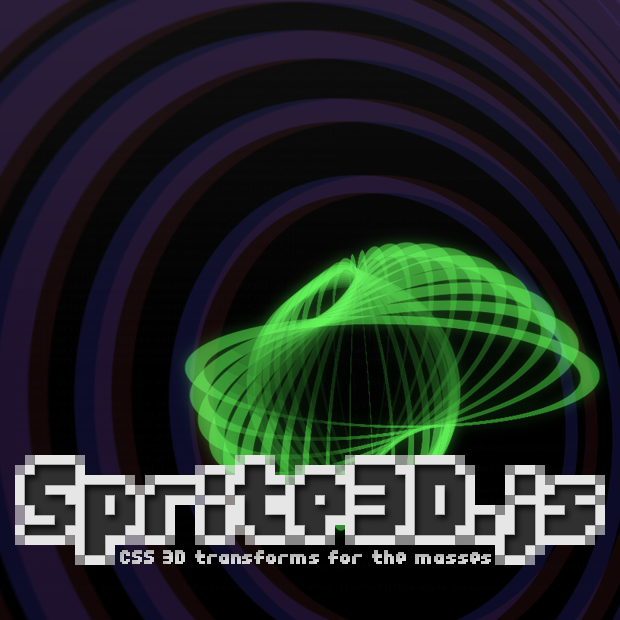
<style>
.page{position:relative;width:620px;height:620px}
.page>*{position:absolute;margin:0}
.t1{font:20.3px "04b25";color:#c4c4c4;scale:1.2 1}
</style>
<div class="page">
<p class="t1" style="left:120px;top:550px;width:371px;height:14px">CSS 3D transforms for the masses</p>
</div>
